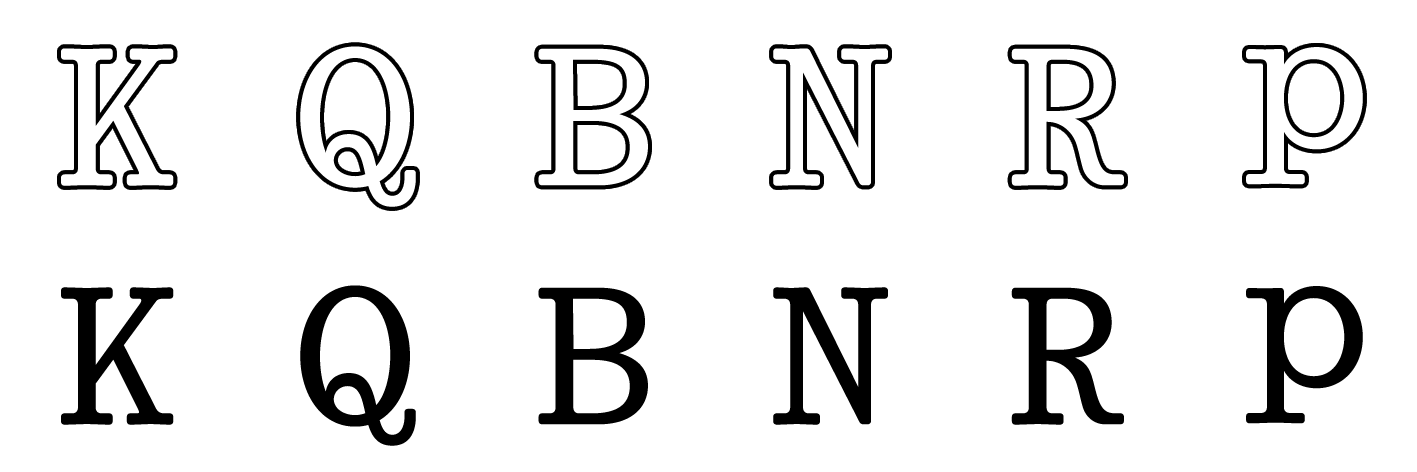
<style>
.page{position:relative;width:1417px;height:472px;background:#ffffff}
.page>*{position:absolute;margin:0}
.t1{font:194.7px/233.1px "444-Crowlista-Mono-Rounded-Light";letter-spacing:0.57em;color:#000000}
.t2{font:194.7px/239px "444-Crowlista-Mono-Rounded-Light";letter-spacing:0.57em;color:#ffffff}
</style>
<div class="page">
<p class="t1" style="left:61px;top:46px;width:1302px;height:400px">KQBNRp<br><span class="t2">KQBNRp</span></p>
</div>
